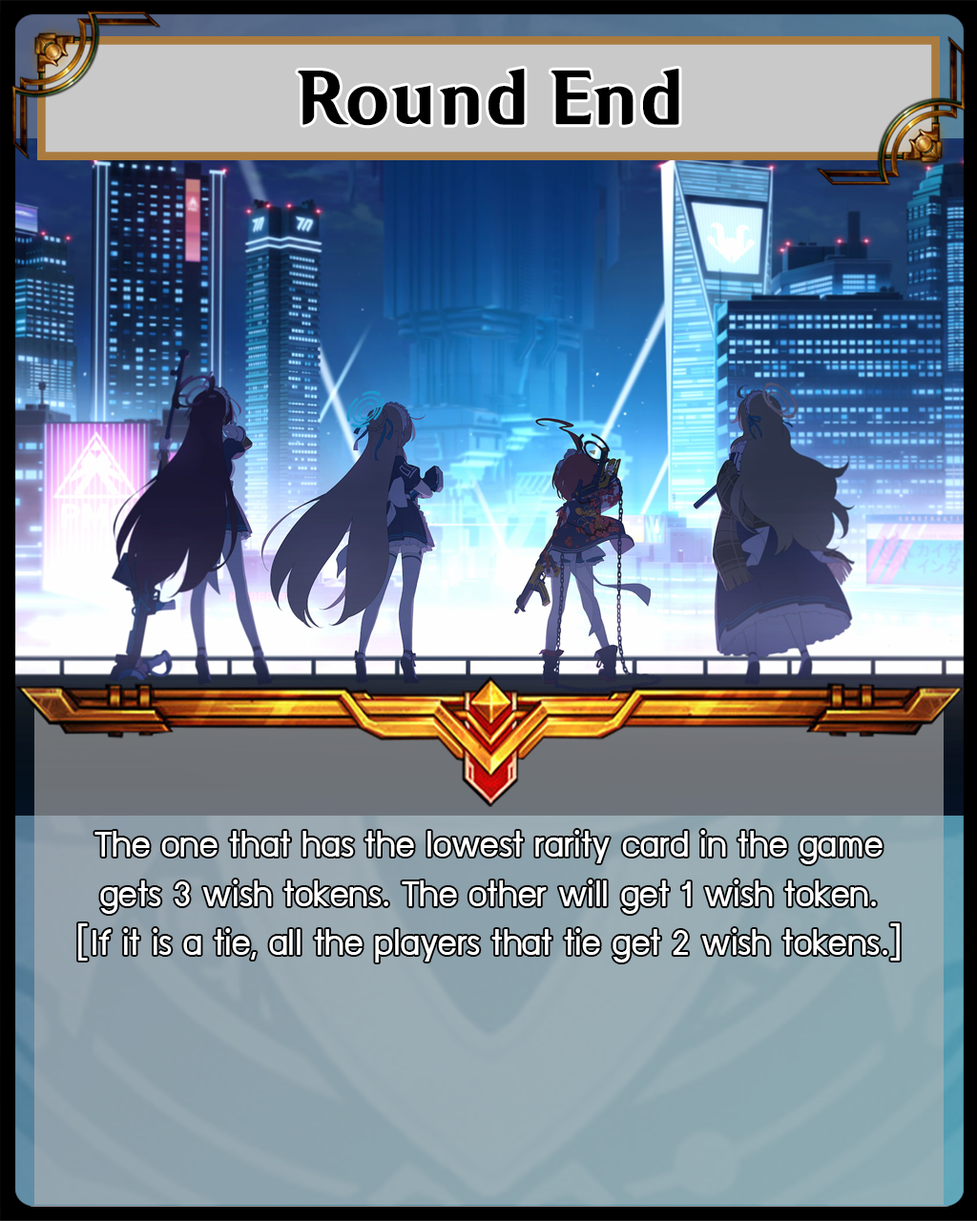
<style>
.page{position:relative;width:977px;height:1221px}
.page>*{position:absolute;margin:0}
.t1{font:67.8px "HYWenHei-HEW";color:#000000}
.t2{font:40.7px "supermarket";color:#ffffff}
</style>
<div class="page">
<p class="t1" style="left:298px;top:69px;width:381px;height:57px">Round End</p>
<p class="t2" style="left:78px;top:830px;width:821px;height:132px;text-align:center">The one that has the lowest rarity card in the game<br>gets 3 wish tokens. The other will get 1 wish token.<br>[If it is a tie, all the players that tie get 2 wish tokens.]</p>
</div>
